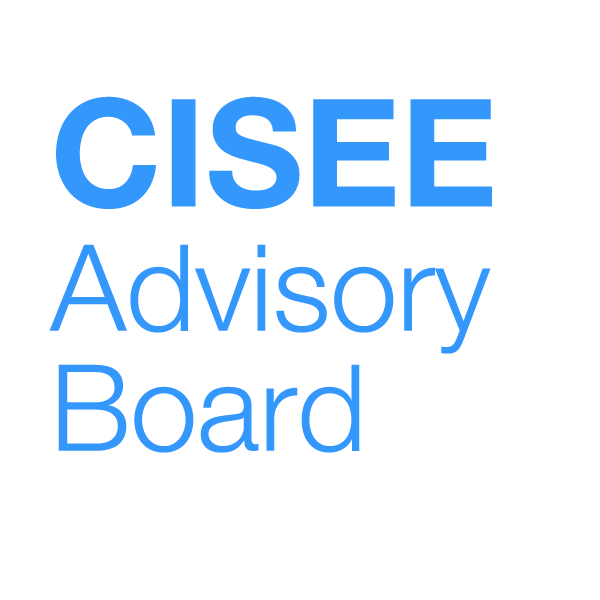
<style>
.page{position:relative;width:600px;height:600px;background:#ffffff}
.page>*{position:absolute;margin:0}
.t1{font:120px/120px "HelveticaNeue-Light";color:#3497fc}
.t2{font:150px/150px "HelveticaNeue-Bold";color:#3497fc}
</style>
<div class="page">
<p class="t1" style="left:49px;top:96px;width:443px;height:357px"><span class="t2">CISEE<br></span>Advisory<br>Board</p>
</div>
